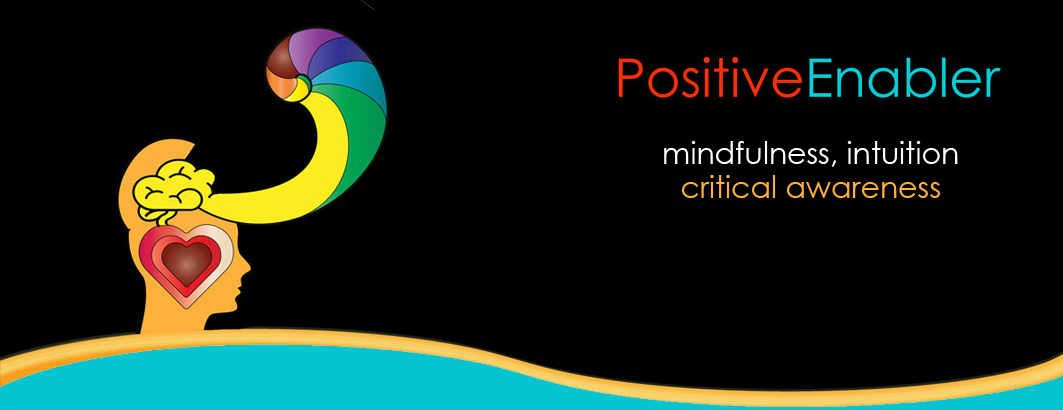
<style>
.page{position:relative;width:1063px;height:410px;background:#000000}
.page>*{position:absolute;margin:0}
.t1{font:30px/33.9px "CenturyGothic";color:#ffffff}
.t2{font:30px/33.9px "CenturyGothic";color:#fcb13c}
</style>
<div class="page">
<p class="t1" style="left:664px;top:141px;width:294px;height:57px;text-align:center">mindfulness, intuition  <br><span class="t2">critical awareness</span></p>
</div>
